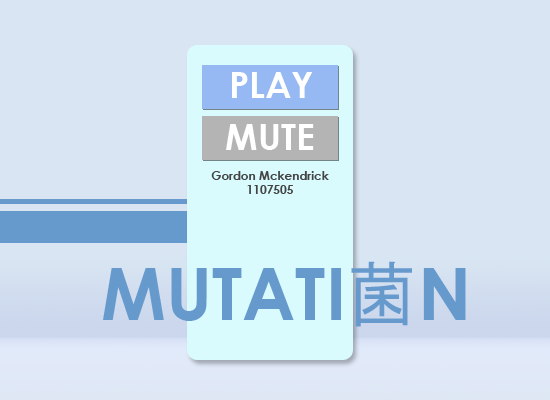
<style>
.page{position:relative;width:550px;height:400px;background:#d9e5f2}
.page>*{position:absolute;margin:0}
.t1{font:36px "CenturyGothic-Bold";color:#ffffff}
.t2{font:12px "CenturyGothic-Bold";color:#444444}
.t3{font:72px "CenturyGothic-Bold";color:#6699cc}
.t4{font:72px "MS-Gothic";color:#6699cc}
</style>
<div class="page">
<p class="t1" style="left:232px;top:72px;width:81px;height:26px">PLAY</p>
<p class="t1" style="left:226px;top:124px;width:88px;height:26px">MUTE</p>
<p class="t2" style="left:211px;top:171px;width:118px;height:23px;text-align:center">Gordon Mckendrick<br>1107505</p>
<p class="t3" style="left:103px;top:261px;width:363px;height:66px">MUTATI<span class="t4">菌</span>N</p>
</div>
